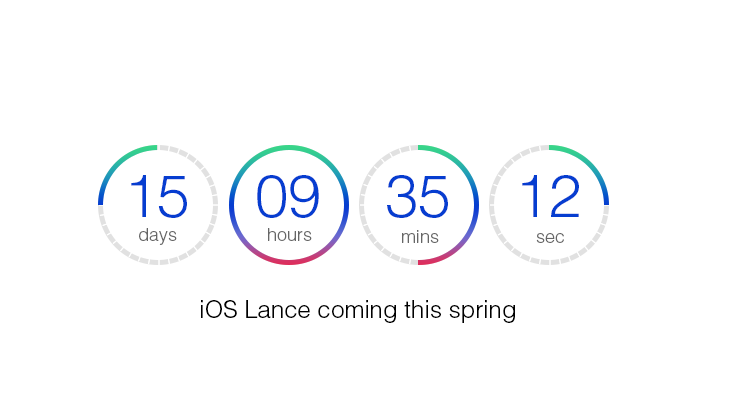
<style>
.page{position:relative;width:730px;height:410px;background:#ffffff}
.page>*{position:absolute;margin:0}
.t1{font:60px "HelveticaLTStd-Light";color:#063dd0}
.t2{font:18px "HelveticaLTStd-Light";color:#666666}
.t3{font:24px "HelveticaLTStd-Light";color:#000000}
</style>
<div class="page">
<p class="t1" style="left:131px;top:175px;width:56px;height:43px">15</p>
<p class="t1" style="left:257px;top:175px;width:62px;height:43px">09</p>
<p class="t1" style="left:387px;top:175px;width:61px;height:43px">35</p>
<p class="t1" style="left:522px;top:175px;width:57px;height:42px">12</p>
<p class="t2" style="left:139px;top:228px;width:38px;height:17px">days</p>
<p class="t2" style="left:268px;top:228px;width:44px;height:13px">hours</p>
<p class="t2" style="left:402px;top:230px;width:37px;height:13px">mins</p>
<p class="t2" style="left:536px;top:233px;width:28px;height:10px">sec</p>
<p class="t3" style="left:201px;top:300px;width:314px;height:23px">iOS Lance coming this spring</p>
</div>
